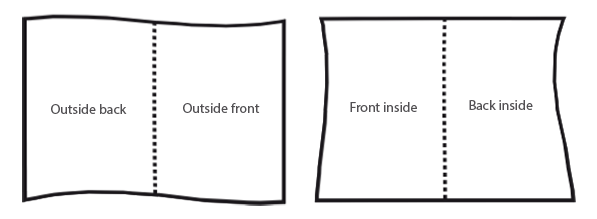
<style>
.page{position:relative;width:597px;height:219px;background:#ffffff}
.page>*{position:absolute;margin:0}
.t1{font:13.8px "MyriadPro-Regular";color:#525053}
</style>
<div class="page">
<p class="t1" style="left:350px;top:102px;width:67px;height:10px">Front inside</p>
<p class="t1" style="left:469px;top:100px;width:64px;height:10px">Back inside</p>
<p class="t1" style="left:51px;top:104px;width:76px;height:10px">Outside back</p>
<p class="t1" style="left:183px;top:103px;width:77px;height:10px">Outside front</p>
</div>
